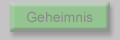
<style>
.page{position:relative;width:120px;height:40px;background:#94c591}
.page>*{position:absolute;margin:0}
.t1{font:14px "ArialMT";color:#8b898b}
</style>
<div class="page">
<p class="t1" style="left:27px;top:11px;width:66px;height:12px">Geheimnis</p>
</div>
